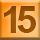
<style>
.page{position:relative;width:40px;height:40px}
.page>*{position:absolute;margin:0}
.t1{font:37.5px "Arial-BoldMT";color:#9c5302}
.t2{font:37.5px "Arial-BoldMT";color:#954f02}
</style>
<div class="page">
<p class="t1" style="left:4px;top:6px;width:12px;height:27px">1</p>
<p class="t2" style="left:17px;top:6px;width:19px;height:27px">5</p>
</div>
